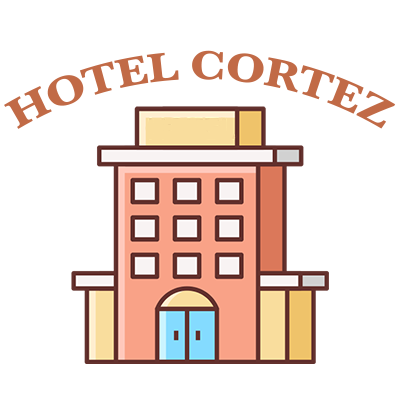
<style>
.page{position:relative;width:400px;height:400px;background:#ffffff}
.page>*{position:absolute;margin:0}
.t1{font:41.7px "Baskerville-Bold";color:#c16a46}
</style>
<div class="page">
<p class="t1" style="left:4px;top:50px;width:392px;height:79px;text-align:center">HOTEL CORTEZ</p>
</div>
